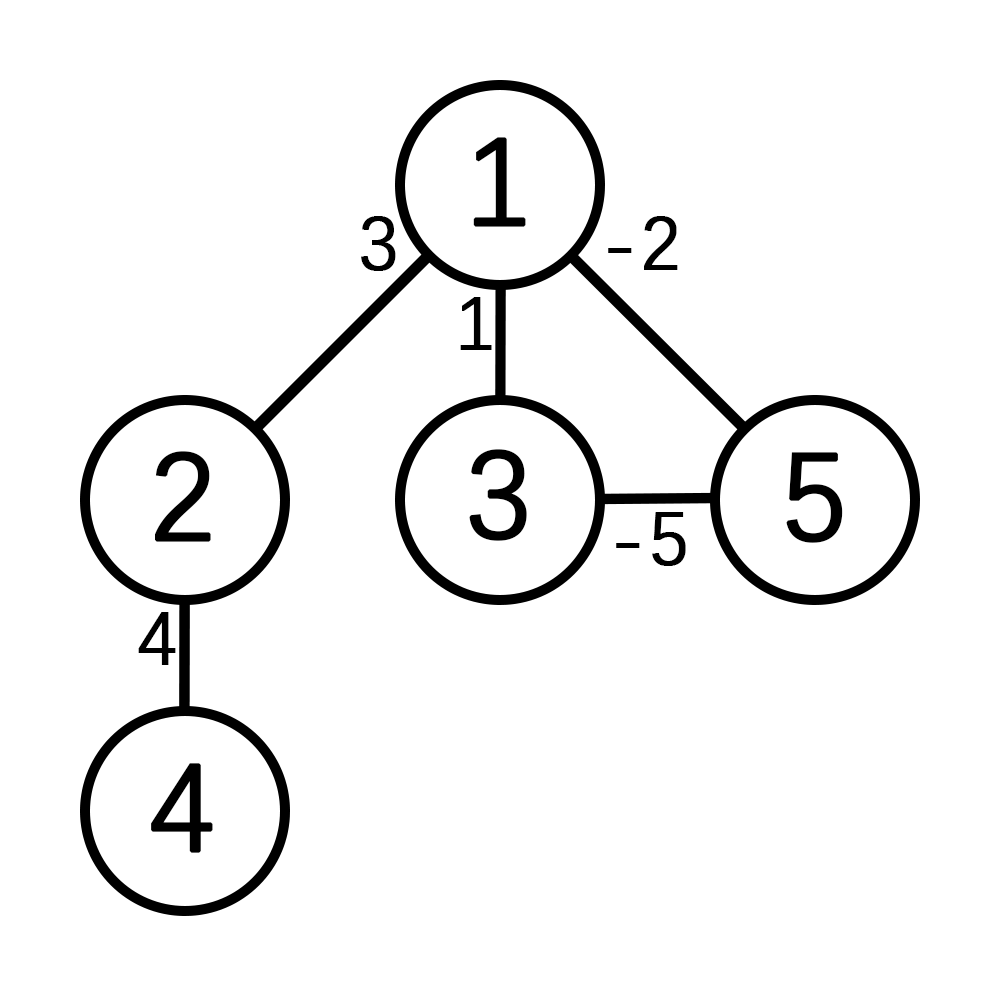
<style>
.page{position:relative;width:1000px;height:1000px;background:#ffffff}
.page>*{position:absolute;margin:0}
.t1{font:125px "DengXian";color:#000000;font-weight:bold}
.t2{font:75px "DengXian";color:#000000;font-weight:bold}
</style>
<div class="page">
<p class="t1" style="left:473px;top:137px;width:53px;height:90px">1</p>
<p class="t2" style="left:361px;top:216px;width:35px;height:55px">3</p>
<p class="t2" style="left:608px;top:216px;width:70px;height:54px">-2</p>
<p class="t2" style="left:460px;top:297px;width:32px;height:53px">1</p>
<p class="t1" style="left:469px;top:449px;width:58px;height:92px">3</p>
<p class="t1" style="left:155px;top:451px;width:56px;height:91px">2</p>
<p class="t1" style="left:786px;top:452px;width:57px;height:91px">5</p>
<p class="t2" style="left:616px;top:512px;width:70px;height:54px">-5</p>
<p class="t2" style="left:138px;top:612px;width:38px;height:53px">4</p>
<p class="t1" style="left:151px;top:763px;width:62px;height:90px">4</p>
</div>
